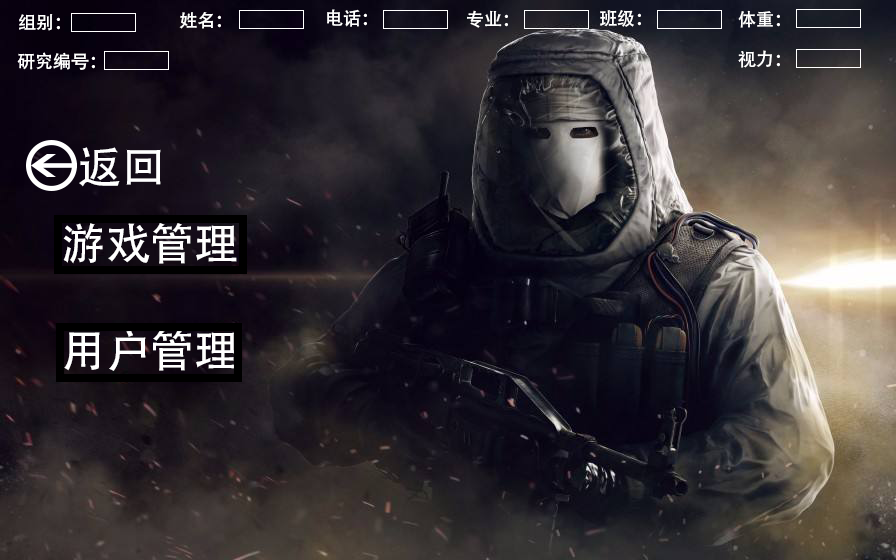
<style>
.page{position:relative;width:896px;height:560px}
.page>*{position:absolute;margin:0}
.t1{font:18px "AdobeHeitiStd-Regular";color:#ffffff}
.t2{font:44.2px "AdobeHeitiStd-Regular";color:#ffffff}
</style>
<div class="page">
<p class="t1" style="left:19px;top:14px;width:41px;height:17px">组别：</p>
<p class="t1" style="left:179px;top:12px;width:42px;height:17px">姓名：</p>
<p class="t1" style="left:327px;top:9px;width:40px;height:18px">电话：</p>
<p class="t1" style="left:467px;top:10px;width:41px;height:18px">专业：</p>
<p class="t1" style="left:600px;top:10px;width:41px;height:17px">班级：</p>
<p class="t1" style="left:738px;top:10px;width:42px;height:18px">体重：</p>
<p class="t1" style="left:17px;top:52px;width:78px;height:18px">研究编号：</p>
<p class="t1" style="left:738px;top:50px;width:42px;height:18px">视力：</p>
<p class="t2" style="left:79px;top:147px;width:82px;height:40px">返回</p>
<p class="t2" style="left:63px;top:222px;width:174px;height:42px">游戏管理</p>
<p class="t2" style="left:64px;top:329px;width:173px;height:42px">用户管理</p>
</div>
